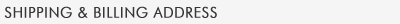
<style>
.page{position:relative;width:400px;height:24px;background:#f5f5f5}
.page>*{position:absolute;margin:0}
.t1{font:14.7px "FuturaBT-Light";letter-spacing:0.025em;color:#363636;text-transform:uppercase;font-weight:bold}
</style>
<div class="page">
<p class="t1" style="left:4px;top:6px;width:213px;height:12px">SHIPPING &amp; BILLING ADDRESS</p>
</div>
